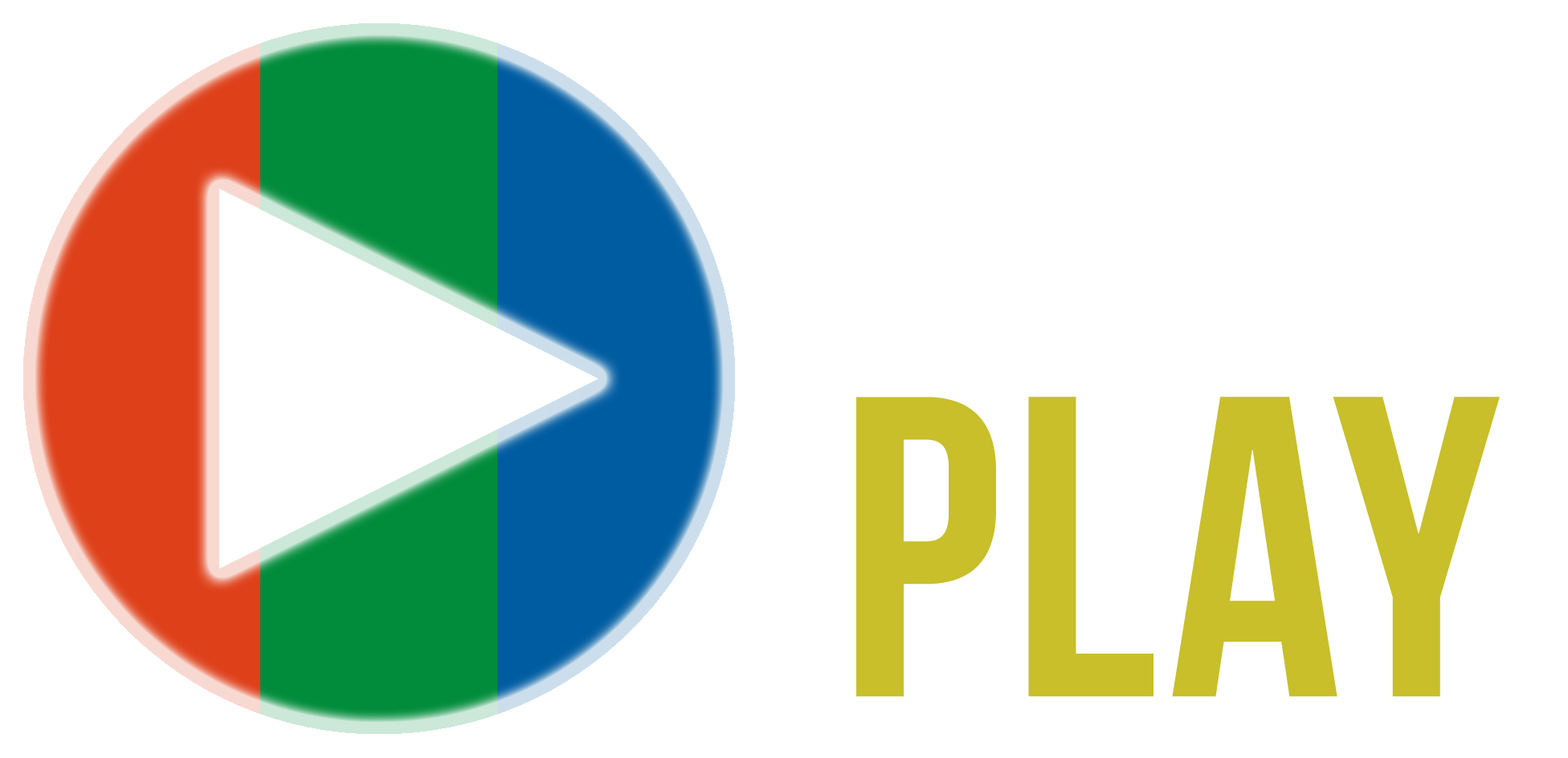
<style>
.page{position:relative;width:1568px;height:758px;background:#ffffff}
.page>*{position:absolute;margin:0}
.t1{font:428.4px "BebasNeue";letter-spacing:0.025em;color:#c8bf2a}
</style>
<div class="page">
<p class="t1" style="left:856px;top:397px;width:644px;height:300px">Play</p>
</div>
